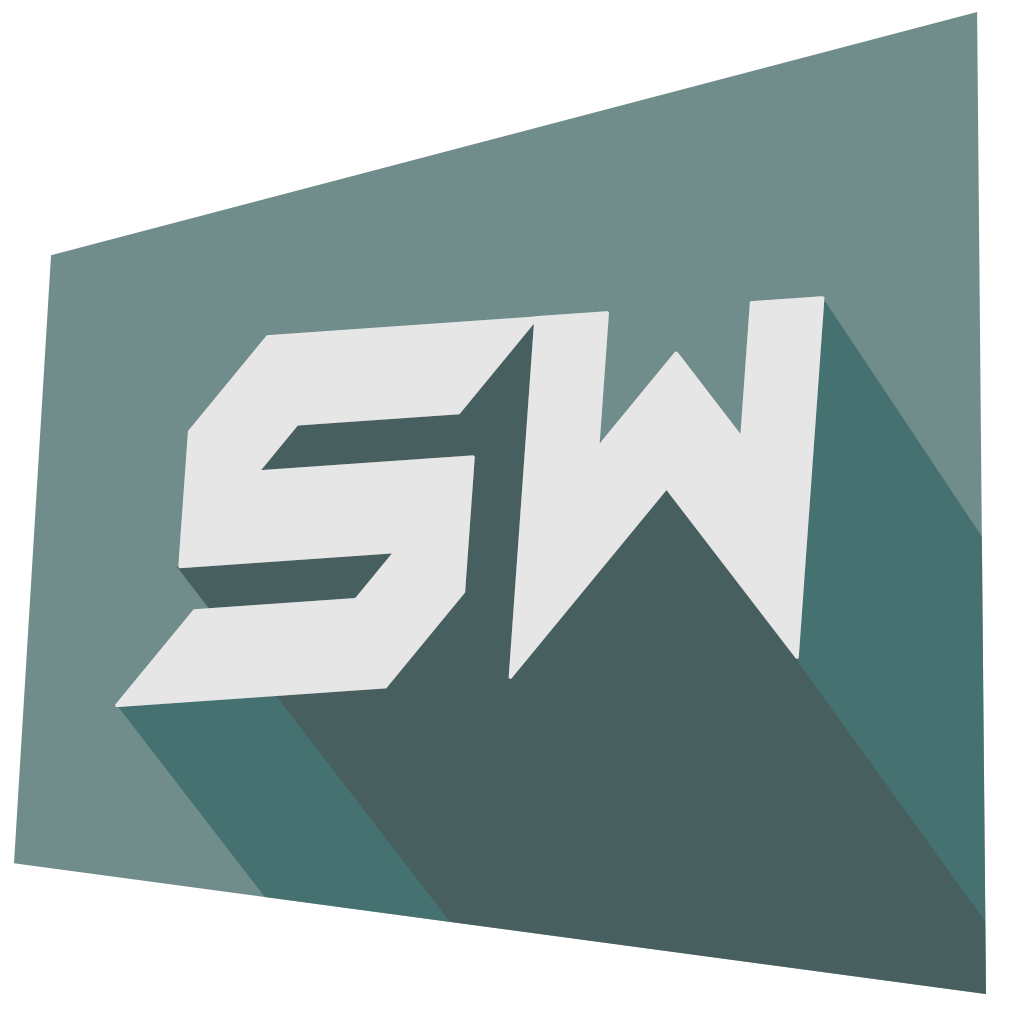
<style>
.page{position:relative;width:1024px;height:1024px;background:#ffffff}
.page>*{position:absolute;margin:0}
.t1{font:715.6px "Vermin-Vibes";color:#e6e6e6;font-weight:bold;font-style:italic;scale:0.8 1}
</style>
<div class="page">
<p class="t1" style="left:115px;top:296px;width:710px;height:412px;rotate:-4deg">SW</p>
</div>
